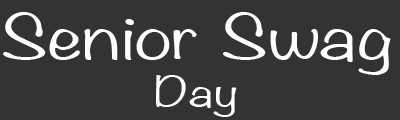
<style>
.page{position:relative;width:400px;height:120px;background:#333333}
.page>*{position:absolute;margin:0}
.t1{font:55px "Noteworthy-Light";color:#fefcfc;scale:1.5 1}
.t2{font:36px "Noteworthy-Light";color:#fefcfc;scale:1.5 1}
</style>
<div class="page">
<p class="t1" style="left:3px;top:12px;width:388px;height:63px">Senior Swag</p>
<p class="t2" style="left:156px;top:75px;width:81px;height:42px">Day</p>
</div>
